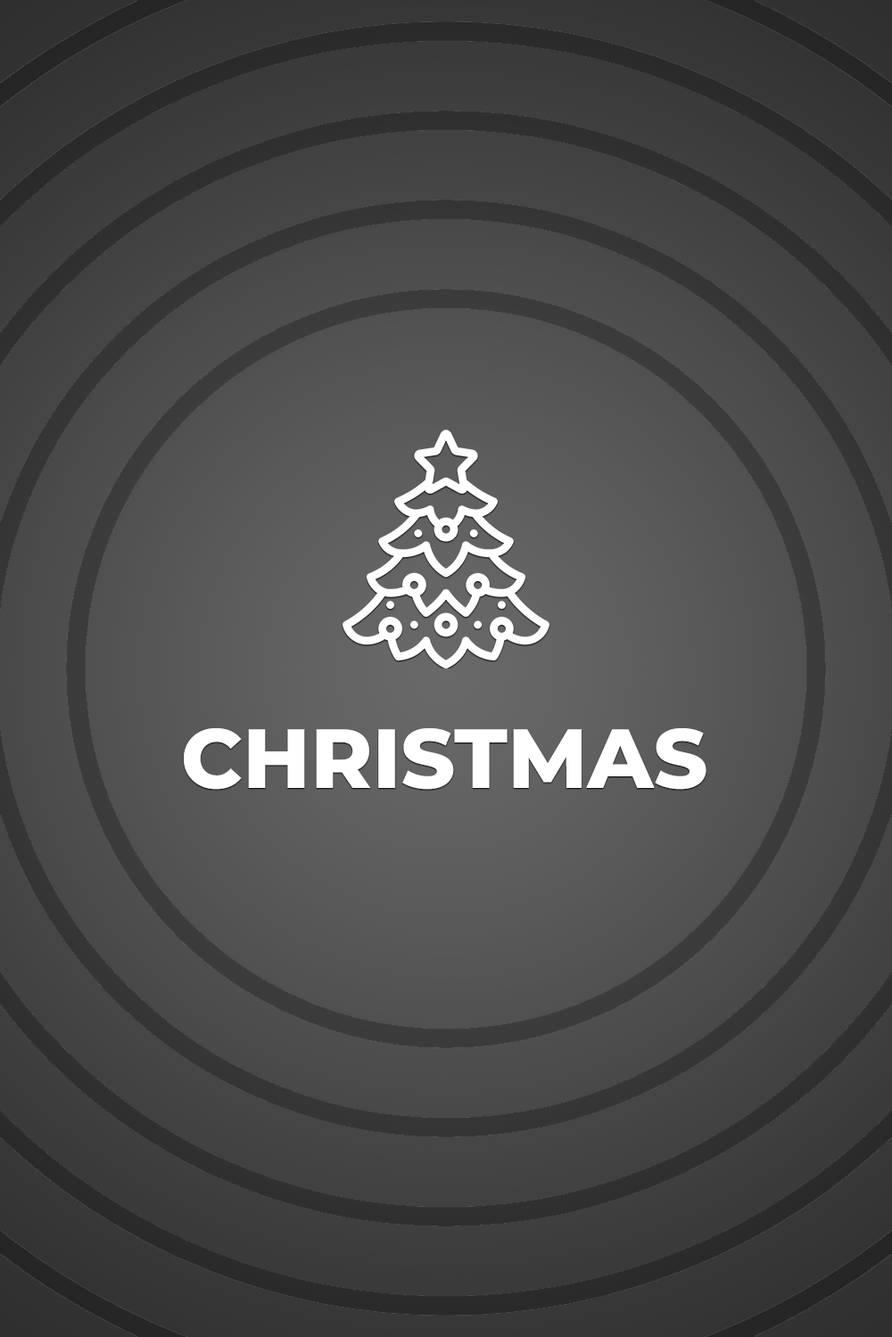
<style>
.page{position:relative;width:892px;height:1337px}
.page>*{position:absolute;margin:0}
.t1{font:83.8px "MontserratRoman-ExtraBold";color:#ffffff}
</style>
<div class="page">
<p class="t1" style="left:184px;top:728px;width:522px;height:62px">CHRISTMAS</p>
</div>
